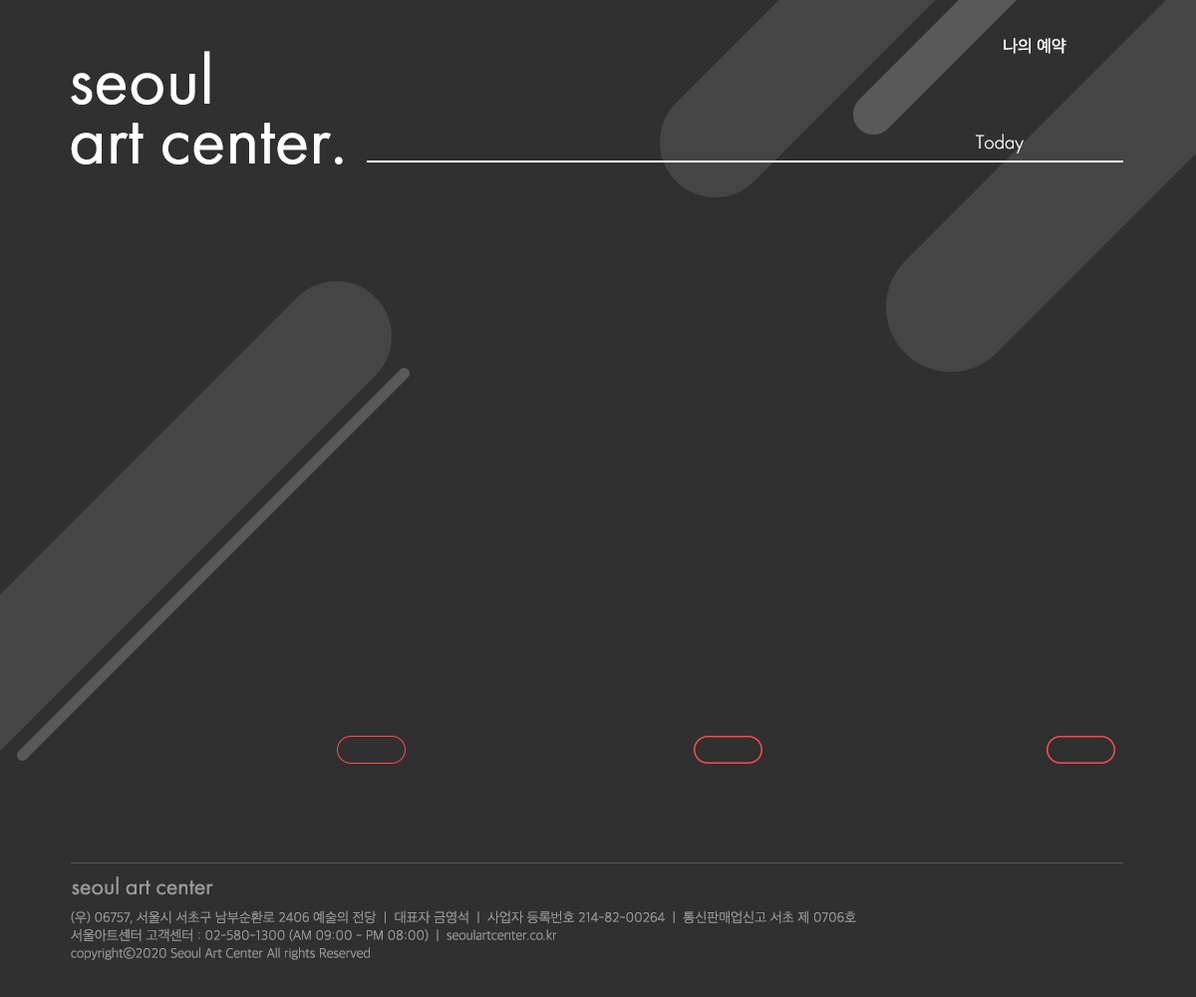
<style>
.page{position:relative;width:1196px;height:997px;background:#303030}
.page>*{position:absolute;margin:0}
.t1{font:15.9px "SDGothicNeoa-dRg";color:#ffffff}
.t2{font:71.8px/59.8px "FuturaPT-Book";color:#ffffff}
.t3{font:19.9px "FuturaPT-Light";color:#ffffff}
.t4{font:23.9px "FuturaPT-Book";color:#999999}
.t5{font:13px/17.9px "SDGothicNeoa-bUltLt";color:#999999}
</style>
<div class="page">
<p class="t1" style="left:1004px;top:38px;width:63px;height:16px">나의 예약</p>
<p class="t2" style="left:71px;top:51px;width:272px;height:113px">seoul<br>art center.</p>
<p class="t3" style="left:976px;top:134px;width:48px;height:20px">Today</p>
<p class="t4" style="left:72px;top:876px;width:141px;height:19px">seoul art center</p>
<p class="t5" style="left:71px;top:910px;width:785px;height:50px">(우) 06757, 서울시 서초구 남부순환로 2406 예술의 전당  |  대표자 금영석  |  사업자 등록번호 214-82-00264  |  통신판매업신고 서초 제 0706호<br>서울아트센터 고객센터 : 02-580-1300 (AM 09:00 - PM 08:00)  |  seoulartcenter.co.kr<br>copyrightⓒ2020 Seoul Art Center All rights Reserved</p>
</div>
